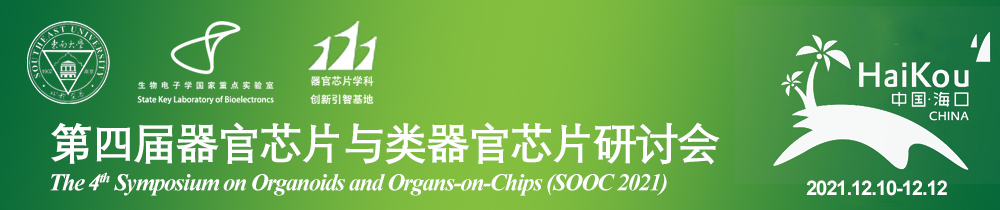
<style>
.page{position:relative;width:1000px;height:210px}
.page>*{position:absolute;margin:0}
.t1{font:44px "DengXian-Bold";letter-spacing:-0.05em;color:#fefefe}
.t2{font:24px "TimesNewRomanPS-BoldItalicMT";letter-spacing:-0.05em;color:#fefefe}
.t3{font:20px "Arial-BoldMT";letter-spacing:-0.05em;color:#fefefe}
</style>
<div class="page">
<p class="t1" style="left:51px;top:122px;width:669px;height:43px">第四届器官芯片与类器官芯片研讨会</p>
<p class="t2" style="left:50px;top:172px;width:617px;height:24px">The 4th Symposium on Organoids and Organs-on-Chips (SOOC 2021)</p>
<p class="t3" style="left:806px;top:180px;width:141px;height:16px">2021.12.10-12.12</p>
</div>
